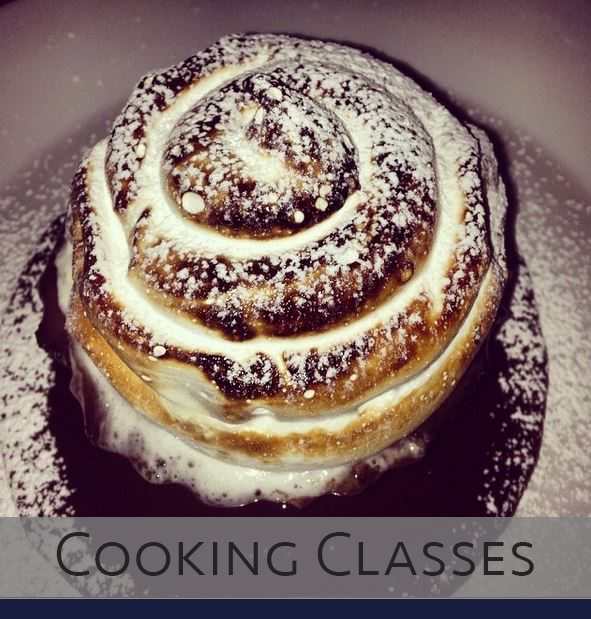
<style>
.page{position:relative;width:591px;height:619px}
.page>*{position:absolute;margin:0}
.t1{font:64px "Seravek-Light";color:#232323;font-variant:small-caps}
</style>
<div class="page">
<p class="t1" style="left:56px;top:532px;width:478px;height:44px">Cooking Classes</p>
</div>
